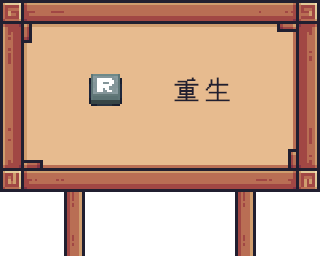
<style>
.page{position:relative;width:320px;height:256px;background:#e7bb8f}
.page>*{position:absolute;margin:0}
.t1{font:25px "FZXS16--GB1-0";letter-spacing:0.22em;color:#211f30;font-weight:bold}
</style>
<div class="page">
<p class="t1" style="left:174px;top:77px;width:56px;height:25px">重生</p>
</div>
